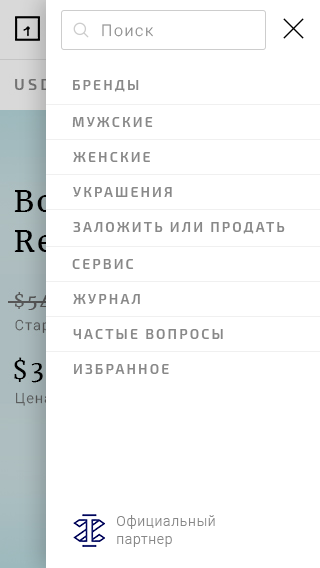
<style>
.page{position:relative;width:320px;height:568px;background:#ffffff}
.page>*{position:absolute;margin:0}
.t1{font:16px "Roboto-Light";letter-spacing:0.1em;color:#888888}
.t2{font:14px "Exo2-SemiBold";letter-spacing:0.15em;color:#888888;text-transform:uppercase}
.t3{font:14px/18px "Roboto-Light";letter-spacing:0.05em;color:#888888}
</style>
<div class="page">
<p class="t1" style="left:102px;top:24px;width:51px;height:13px">Поиск</p>
<p class="t2" style="left:73px;top:80px;width:66px;height:12px">Бренды</p>
<p class="t2" style="left:72px;top:117px;width:81px;height:10px">мужские</p>
<p class="t2" style="left:73px;top:152px;width:77px;height:10px">женские</p>
<p class="t2" style="left:73px;top:187px;width:99px;height:10px">украшения</p>
<p class="t2" style="left:73px;top:222px;width:212px;height:12px">заложить или продать</p>
<p class="t2" style="left:72px;top:259px;width:62px;height:10px">сервис</p>
<p class="t2" style="left:73px;top:294px;width:67px;height:10px">журнал</p>
<p class="t2" style="left:73px;top:329px;width:150px;height:10px">частые вопросы</p>
<p class="t2" style="left:74px;top:364px;width:95px;height:10px">избранное</p>
<p class="t3" style="left:117px;top:515px;width:98px;height:32px">Официальный<br>партнер</p>
</div>
